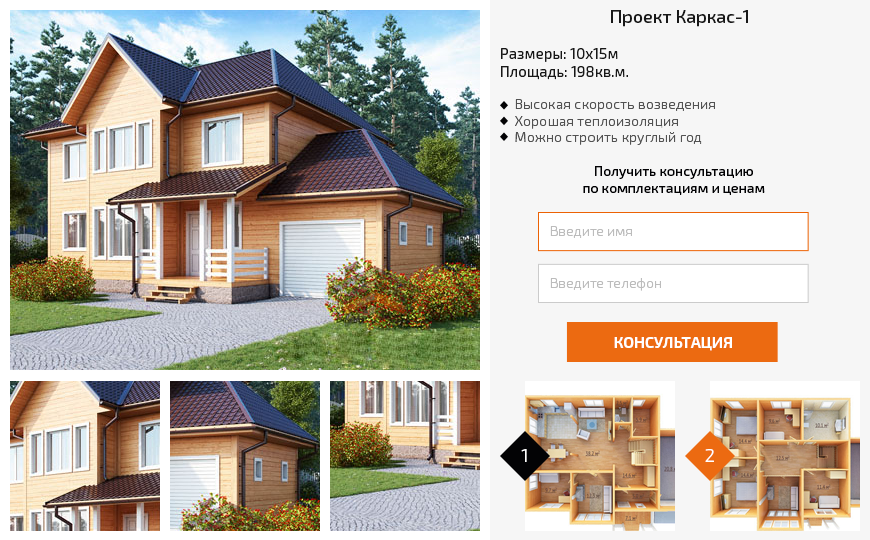
<style>
.page{position:relative;width:870px;height:540px;background:#f6f6f6}
.page>*{position:absolute;margin:0}
.t1{font:15px "Exo2.0-Regular";color:#181818}
.t2{font:18px "Exo2.0-Medium";color:#181818}
.t3{font:14px "Exo2.0-Light";letter-spacing:0.01em;color:#525252}
.t4{font:14px "Exo2.0-Medium";color:#020204}
.t5{font:14px "Exo2.0-Light";color:#bcbcbc}
.t6{font:16px "Exo2.0-SemiBold";color:#ffffff;text-transform:uppercase}
.t7{font:18px "Exo2.0-Light";letter-spacing:0.01em;color:#ffffff}
</style>
<div class="page">
<p class="t1" style="left:501px;top:10px;width:247px;height:70px;text-align:center"><span class="t2">Проект Каркас-1<br><br></span>Размеры: 10х15м<br>Площадь: 198кв.м.</p>
<p class="t3" style="left:515px;top:99px;width:200px;height:46px">Высокая скорость возведения<br>     Хорошая теплоизоляция<br>     Можно строить круглый год</p>
<p class="t4" style="left:583px;top:166px;width:182px;height:29px;text-align:center">Получить консультацию <br>по комплектациям и ценам</p>
<p class="t5" style="left:550px;top:226px;width:82px;height:12px">Введите имя</p>
<p class="t5" style="left:550px;top:278px;width:111px;height:13px">Введите телефон</p>
<p class="t6" style="left:614px;top:337px;width:118px;height:14px">Консультация</p>
<p class="t7" style="left:521px;top:449px;width:6px;height:13px">1</p>
<p class="t7" style="left:705px;top:449px;width:9px;height:13px">2</p>
</div>
